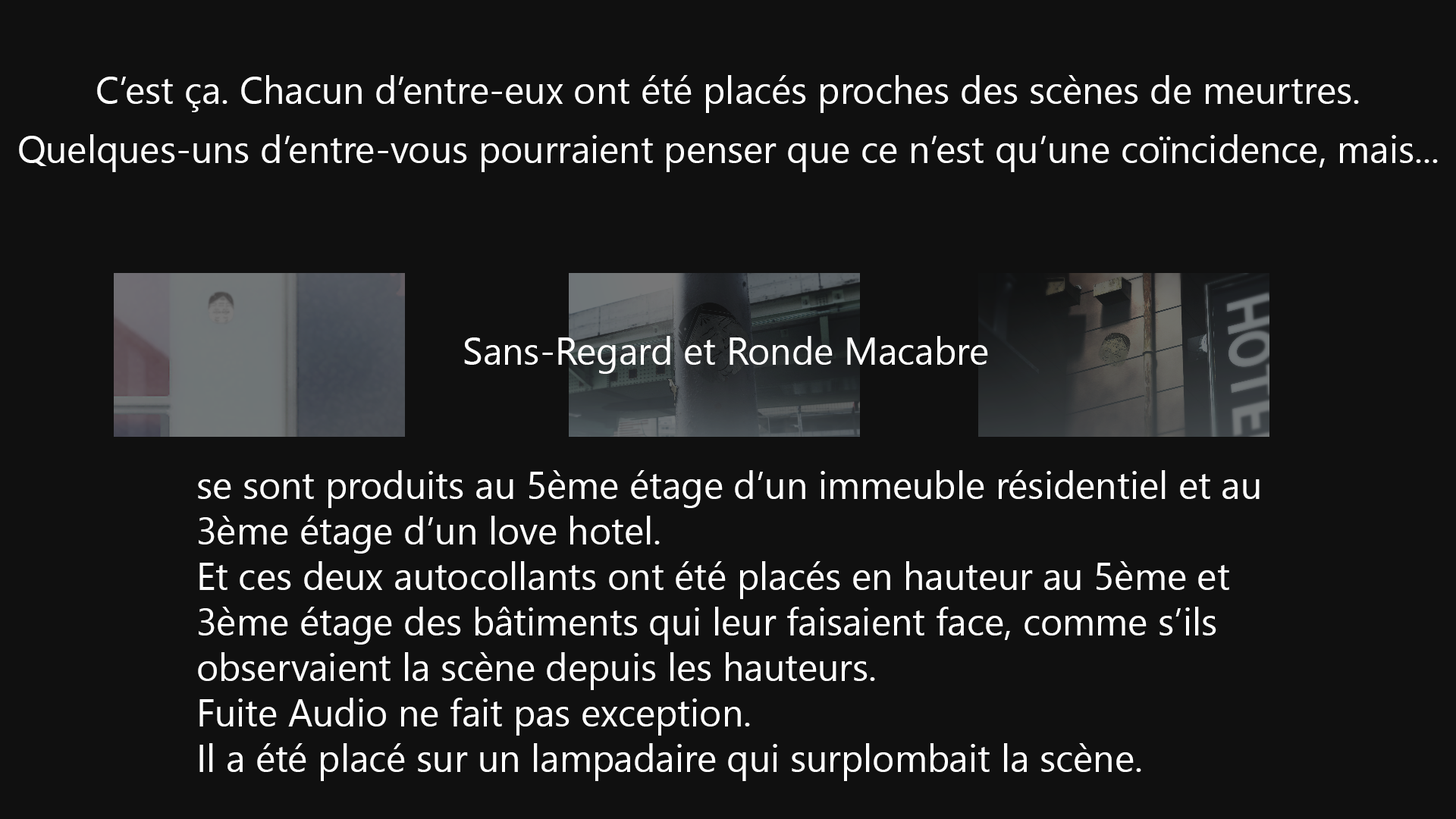
<style>
.page{position:relative;width:1456px;height:819px;background:#101010}
.page>*{position:absolute;margin:0}
.t1{font:37.9px "SegoeUIHistoric";color:#ffffff}
</style>
<div class="page">
<p class="t1" style="left:97px;top:75px;width:1262px;height:38px">C’est ça. Chacun d’entre-eux ont été placés proches des scènes de meurtres.</p>
<p class="t1" style="left:19px;top:134px;width:1419px;height:38px">Quelques-uns d’entre-vous pourraient penser que ce n’est qu’une coïncidence, mais...</p>
<p class="t1" style="left:464px;top:336px;width:524px;height:38px">Sans-Regard et Ronde Macabre</p>
<p class="t1" style="left:198px;top:470px;width:1062px;height:311px">se sont produits au 5ème étage d’un immeuble résidentiel et au <br>3ème étage d’un love hotel.<br>Et ces deux autocollants ont été placés en hauteur au 5ème et <br>3ème étage des bâtiments qui leur faisaient face, comme s’ils <br>observaient la scène depuis les hauteurs.<br>Fuite Audio ne fait pas exception. <br>Il a été placé sur un lampadaire qui surplombait la scène.</p>
</div>
